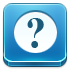
<style>
.page{position:relative;width:70px;height:70px}
.page>*{position:absolute;margin:0}
.t1{font:42px "TimesNewRomanPS-BoldMT";color:#1c5a7a}
</style>
<div class="page">
<p class="t1" style="left:27px;top:18px;width:17px;height:30px">?</p>
</div>
